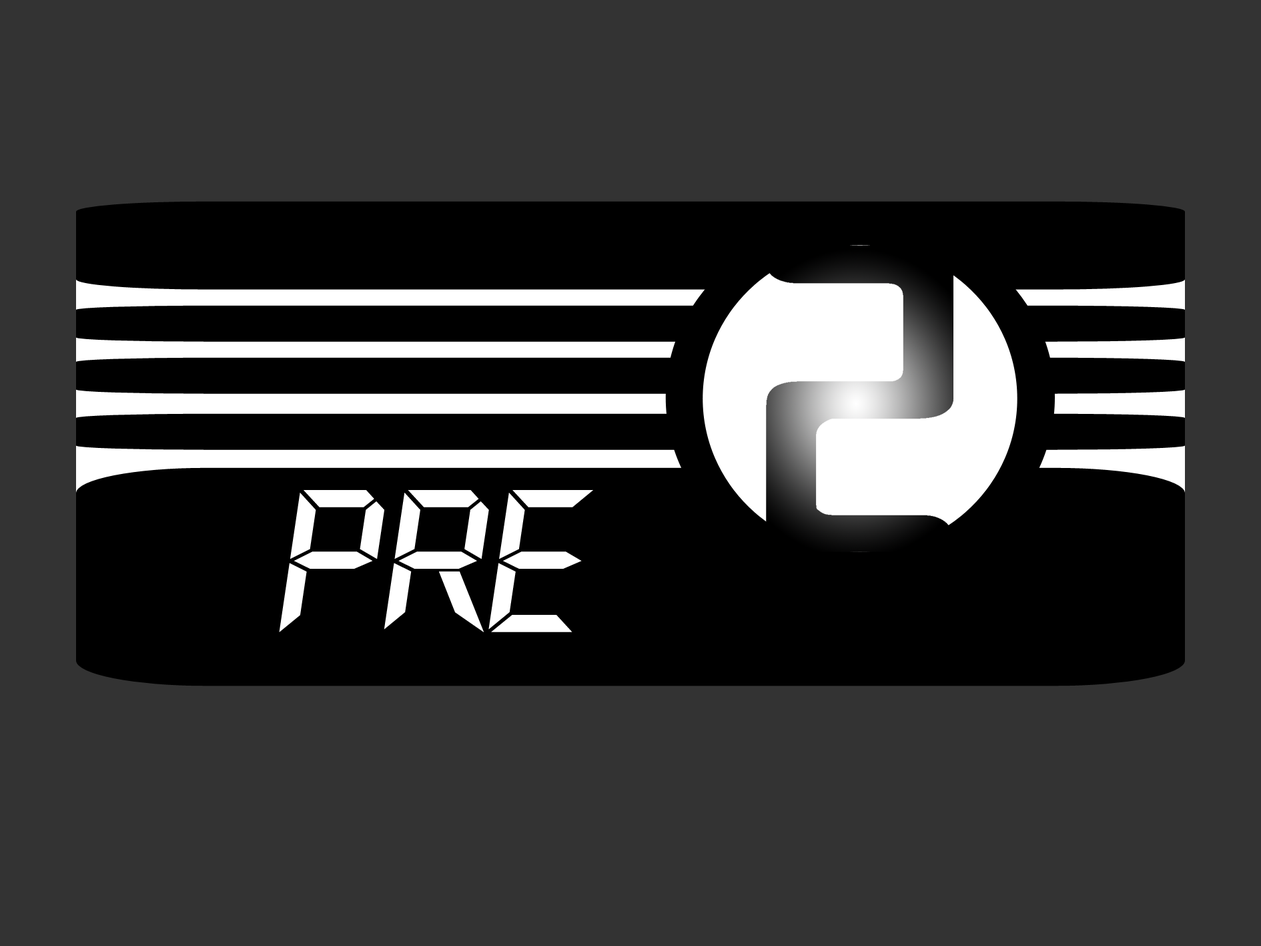
<style>
.page{position:relative;width:1261px;height:946px;background:#333333}
.page>*{position:absolute;margin:0}
.t1{font:197px "QuiverItal";color:#ffffff;scale:1.06 1}
</style>
<div class="page">
<p class="t1" style="left:279px;top:490px;width:314px;height:142px">PRE</p>
</div>
